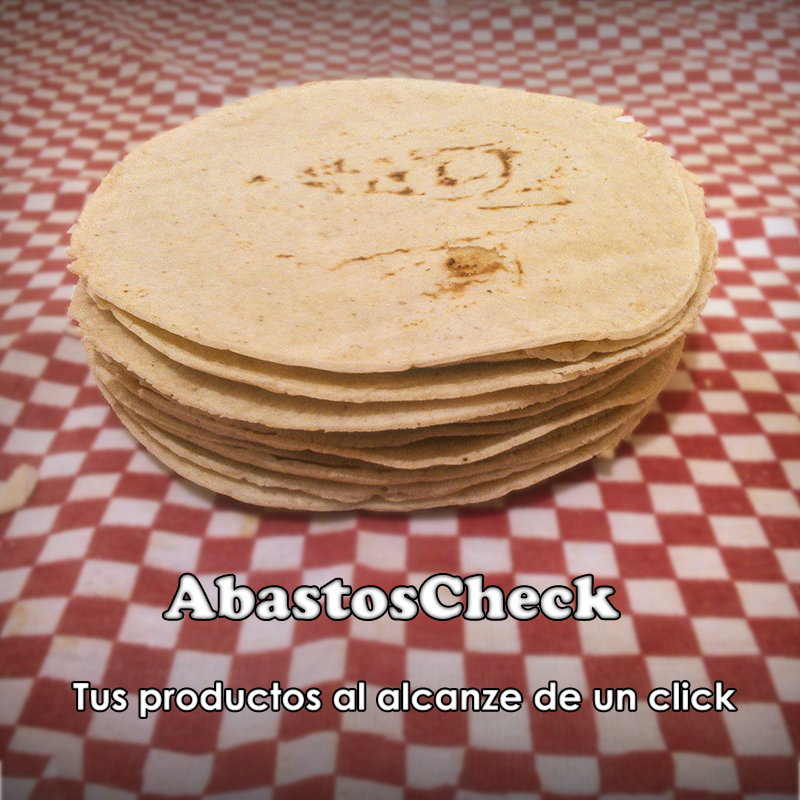
<style>
.page{position:relative;width:800px;height:800px}
.page>*{position:absolute;margin:0}
.t1{font:63.3px "CooperBlack"}
.t2{font:36.9px "CenturyGothic-Bold";color:#ffffff}
</style>
<div class="page">
<p class="t1" style="left:164px;top:574px;width:455px;height:45px">AbastosCheck</p>
<p class="t2" style="left:73px;top:682px;width:664px;height:35px">Tus productos al alcanze de un click</p>
</div>
